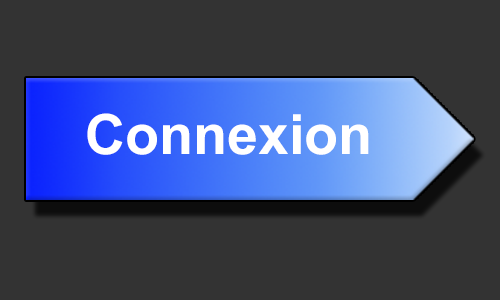
<style>
.page{position:relative;width:500px;height:300px;background:#333333}
.page>*{position:absolute;margin:0}
.t1{font:55.6px "Arial-BoldMT";color:#ffffff}
</style>
<div class="page">
<p class="t1" style="left:87px;top:113px;width:282px;height:42px">Connexion</p>
</div>
